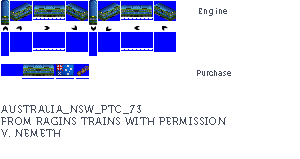
<style>
.page{position:relative;width:300px;height:159px;background:#ffffff}
.page>*{position:absolute;margin:0}
.t1{font:8px "Museo700-Regular";letter-spacing:0.075em;color:#444c5c}
.t2{font:8px "Museo700-Regular";color:#444c5c}
.t3{font:10px "Museo700-Regular";letter-spacing:0.075em;color:#444c5c;text-transform:uppercase}
</style>
<div class="page">
<p class="t1" style="left:199px;top:8px;width:28px;height:8px">Engine</p>
<p class="t2" style="left:197px;top:70px;width:34px;height:6px">Purchase</p>
<p class="t3" style="left:1px;top:105px;width:225px;height:32px">Australia_NSW_PTC_73<br>from ragins trains with permission<br>v. nemeth</p>
</div>
